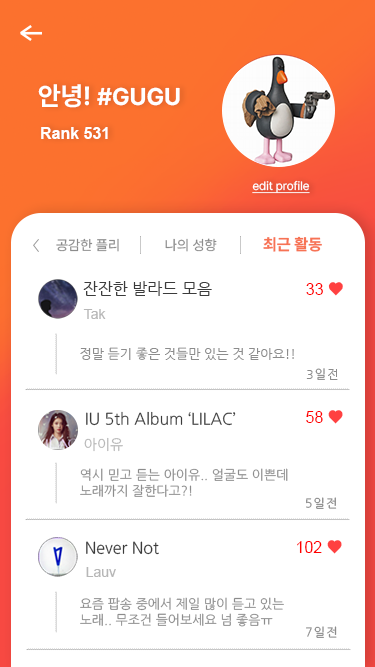
<style>
.page{position:relative;width:375px;height:667px;background:#ffffff}
.page>*{position:absolute;margin:0}
.t1{font:24px "PretendardVariable-Bold";color:#ffffff}
.t2{font:26px "PretendardVariable-Bold";color:#ffffff}
.t3{font:16px "Arial-BoldMT";color:#ffffff}
.t4{font:12px "PretendardVariable-Regular";color:#ffffff;text-decoration:underline}
.t5{font:14px "PretendardVariable-Regular";color:#8c8c8c}
.t6{font:16px "PretendardVariable-Bold";color:#f77354}
.t7{font:16px "NanumGothic";color:#3b3b3b}
.t8{font:16px "ArialMT";color:#ff0000}
.t9{font:18px "PretendardVariable-Regular";color:#ff4141}
.t10{font:14px "ArialMT";color:#b7b7b7}
.t11{font:13px "NanumGothic";color:#8c8c8c}
.t12{font:12px "NanumGothic";letter-spacing:0.1em;color:#8b8b8b}
.t13{font:14px "NanumGothic";color:#b7b7b7}
</style>
<div class="page">
<p class="t1" style="left:38px;top:84px;width:142px;height:24px"><span class="t2">안녕! </span>#GUGU</p>
<p class="t3" style="left:41px;top:127px;width:67px;height:12px">Rank 531</p>
<p class="t4" style="left:252px;top:180px;width:58px;height:14px">edit profile</p>
<p class="t5" style="left:56px;top:238px;width:63px;height:14px">공감한 플리</p>
<p class="t5" style="left:165px;top:238px;width:52px;height:14px">나의 성향</p>
<p class="t6" style="left:263px;top:236px;width:59px;height:16px">최근 활동</p>
<p class="t7" style="left:83px;top:281px;width:129px;height:15px">잔잔한 발라드 모음</p>
<p class="t8" style="left:306px;top:282px;width:37px;height:14px">33 <span class="t9">♥</span></p>
<p class="t10" style="left:83px;top:309px;width:23px;height:10px">Tak</p>
<p class="t11" style="left:80px;top:347px;width:214px;height:13px">정말 듣기 좋은 것들만 있는 것 같아요!!</p>
<p class="t12" style="left:306px;top:368px;width:32px;height:12px">3일전</p>
<p class="t7" style="left:86px;top:411px;width:150px;height:15px">IU 5th Album ‘LILAC’</p>
<p class="t8" style="left:306px;top:410px;width:37px;height:14px">58 <span class="t9">♥</span></p>
<p class="t13" style="left:84px;top:437px;width:39px;height:15px">아이유</p>
<p class="t11" style="left:80px;top:468px;width:208px;height:29px">역시 믿고 듣는 아이유.. 얼굴도 이쁜데<br>노래까지 잘한다고?!</p>
<p class="t12" style="left:306px;top:497px;width:31px;height:12px">5일전</p>
<p class="t7" style="left:86px;top:541px;width:73px;height:14px">Never Not</p>
<p class="t8" style="left:297px;top:540px;width:45px;height:14px">102 <span class="t9">♥</span></p>
<p class="t10" style="left:86px;top:567px;width:30px;height:10px">Lauv</p>
<p class="t11" style="left:80px;top:597px;width:204px;height:30px">요즘 팝송 중에서 제일 많이 듣고 있는<br>노래.. 무조건 들어보세요 넘 좋음ㅠ</p>
<p class="t12" style="left:306px;top:626px;width:31px;height:12px">7일전</p>
</div>
